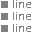
<style>
.page{position:relative;width:32px;height:32px;background:#ffffff}
.page>*{position:absolute;margin:0}
.t1{font:11px "DejaVuSans";color:#808080}
</style>
<div class="page">
<p class="t1" style="left:13px;top:0px;width:19px;height:9px">line</p>
</div>
